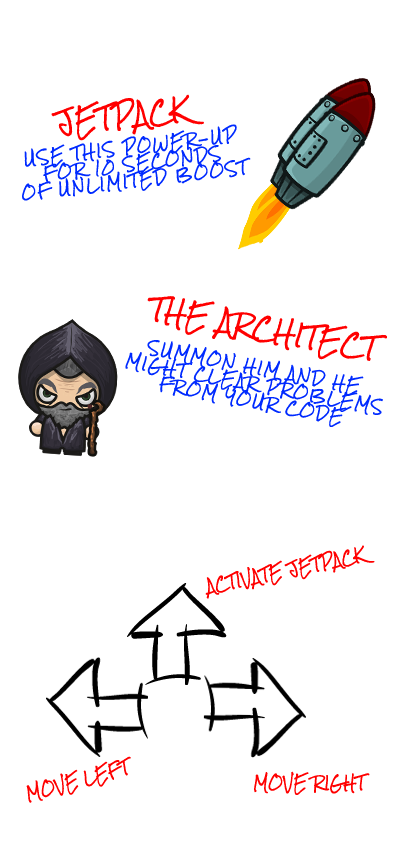
<style>
.page{position:relative;width:400px;height:850px;background:#ffffff}
.page>*{position:absolute;margin:0}
.t1{font:24px "RockSalt";color:#ff0000}
.t2{font:14px "RockSalt";letter-spacing:0.1em;color:#002aff}
.t3{font:14.6px "RockSalt";color:#ff0000;scale:0.95 1}
</style>
<div class="page">
<p class="t1" style="left:51px;top:94px;width:153px;height:47px;rotate:-6deg">JETPACK</p>
<p class="t2" style="left:22px;top:124px;width:229px;height:77px;text-align:center;rotate:-7deg">USE THIS POWER-UP<br>FOR 10 SECONDS<br>OF UNLIMITED BOOST</p>
<p class="t1" style="left:147px;top:296px;width:240px;height:65px;rotate:10deg">THE ARCHITECT</p>
<p class="t2" style="left:125px;top:340px;width:258px;height:87px;text-align:center;rotate:11deg">SUMMON HIM AND HE <br>MIGHT CLEAR PROBLEMS<br>FROM YOUR CODE</p>
<p class="t3" style="left:205px;top:545px;width:170px;height:54px;rotate:-12deg">ACTIVATE JETPACK</p>
<p class="t3" style="left:26px;top:756px;width:105px;height:47px;rotate:-15deg">MOVE LEFT</p>
<p class="t3" style="left:254px;top:771px;width:116px;height:24px">MOVE RIGHT</p>
</div>
